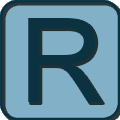
<style>
.page{position:relative;width:120px;height:120px;background:#82b1c7}
.page>*{position:absolute;margin:0}
.t1{font:117.2px "ArialMT";color:#0a3241}
</style>
<div class="page">
<p class="t1" style="left:28px;top:18px;width:74px;height:84px">R</p>
</div>
